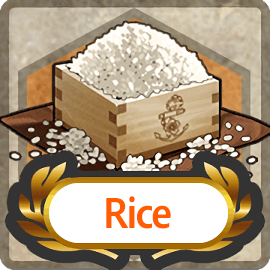
<style>
.page{position:relative;width:270px;height:270px}
.page>*{position:absolute;margin:0}
.t1{font:45px "AdobeClean-Bold";letter-spacing:-0.04em;color:#ff5d00;scale:0.9 1}
</style>
<div class="page">
<p class="t1" style="left:106px;top:196px;width:65px;height:33px">Rice</p>
</div>
